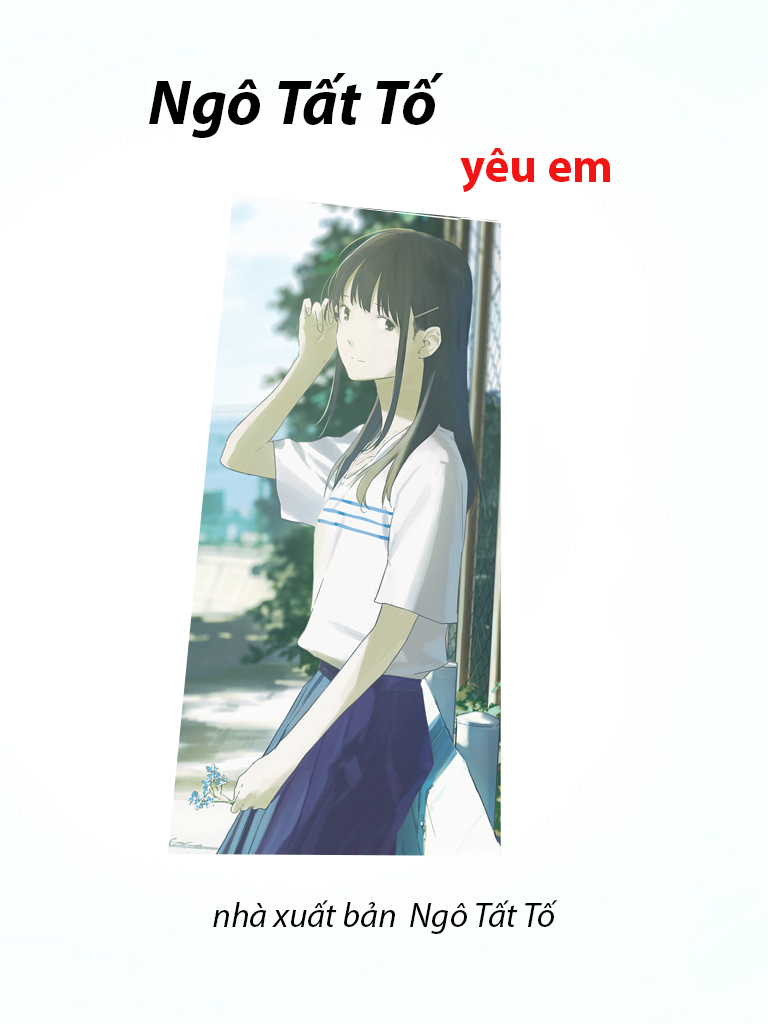
<style>
.page{position:relative;width:768px;height:1024px;background:#ffffff}
.page>*{position:absolute;margin:0}
.t1{font:64px "MyriadPro-BoldIt";color:#000000}
.t2{font:48px "MyriadPro-Bold";color:#f41414}
.t3{font:34.7px "MyriadPro-It";color:#000000}
</style>
<div class="page">
<p class="t1" style="left:149px;top:73px;width:295px;height:65px">Ngô Tất Tố</p>
<p class="t2" style="left:460px;top:148px;width:150px;height:44px">yêu em</p>
<p class="t3" style="left:213px;top:900px;width:345px;height:34px">nhà xuất bản  Ngô Tất Tố</p>
</div>
